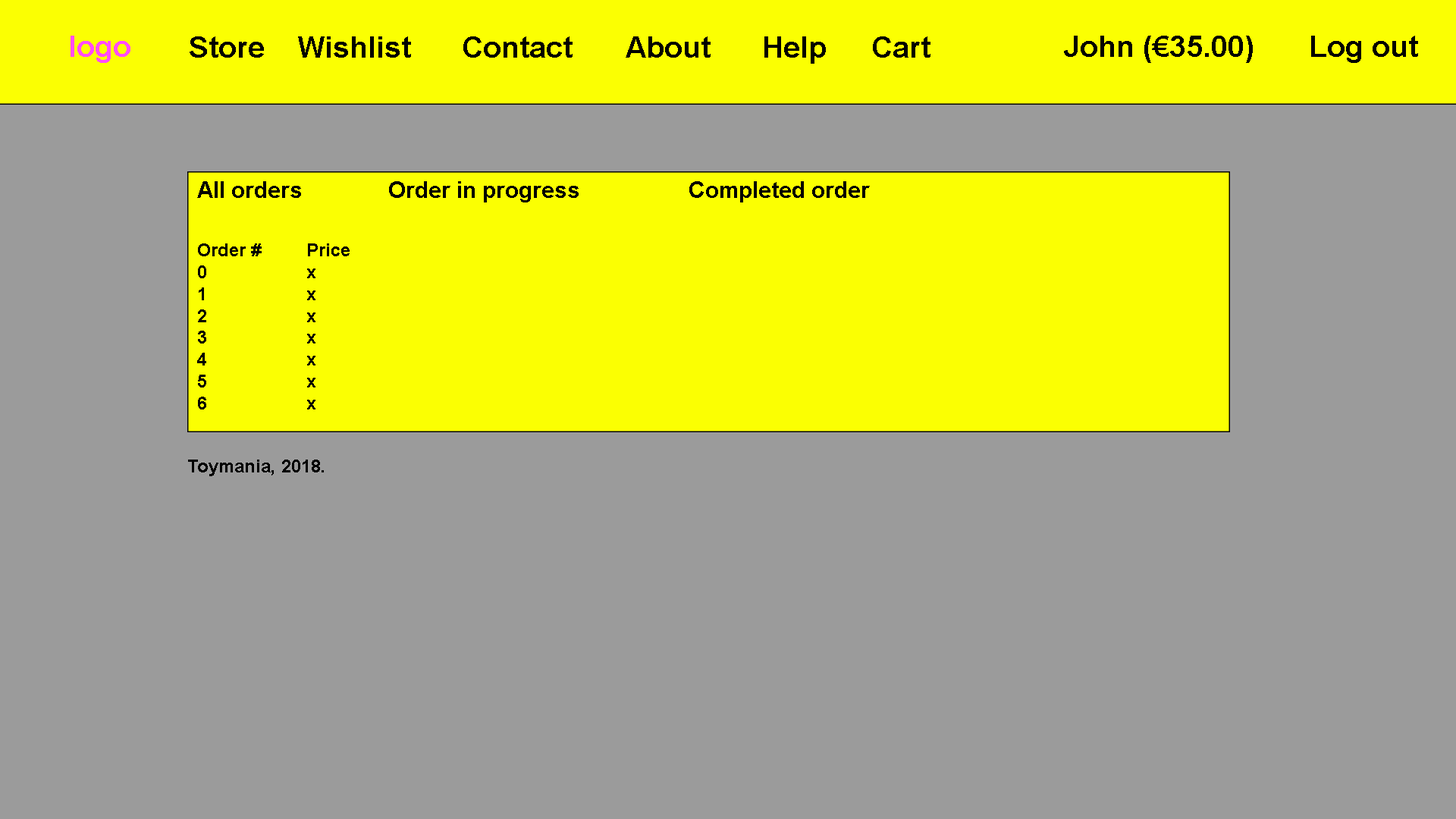
<style>
.page{position:relative;width:1456px;height:819px;background:#9b9b9b}
.page>*{position:absolute;margin:0}
.t1{font:29.6px "Arial-BoldMT";color:#ff4cff}
.t2{font:29.6px "Arial-BoldMT";color:#000000}
.t3{font:29.6px "Arial-BoldMT";color:#010101}
.t4{font:22.7px "Arial-BoldMT";color:#010101}
.t5{font:18.2px "Arial-BoldMT";color:#000000}
</style>
<div class="page">
<p class="t1" style="left:71px;top:36px;width:59px;height:27px">logo</p>
<p class="t2" style="left:190px;top:36px;width:740px;height:28px">Store  Wishlist  Contact  About  Help  Cart</p>
<p class="t3" style="left:1064px;top:36px;width:354px;height:27px">John (€35.00)  Log out</p>
<p class="t4" style="left:197px;top:181px;width:673px;height:21px">All orders    Order in progress    Completed order</p>
<p class="t5" style="left:197px;top:243px;width:153px;height:166px">Order #  Price<br>0    x<br>1    x<br>2    x<br>3    x<br>4    x<br>5    x<br>6    x</p>
<p class="t5" style="left:188px;top:460px;width:136px;height:16px">Toymania, 2018.</p>
</div>
